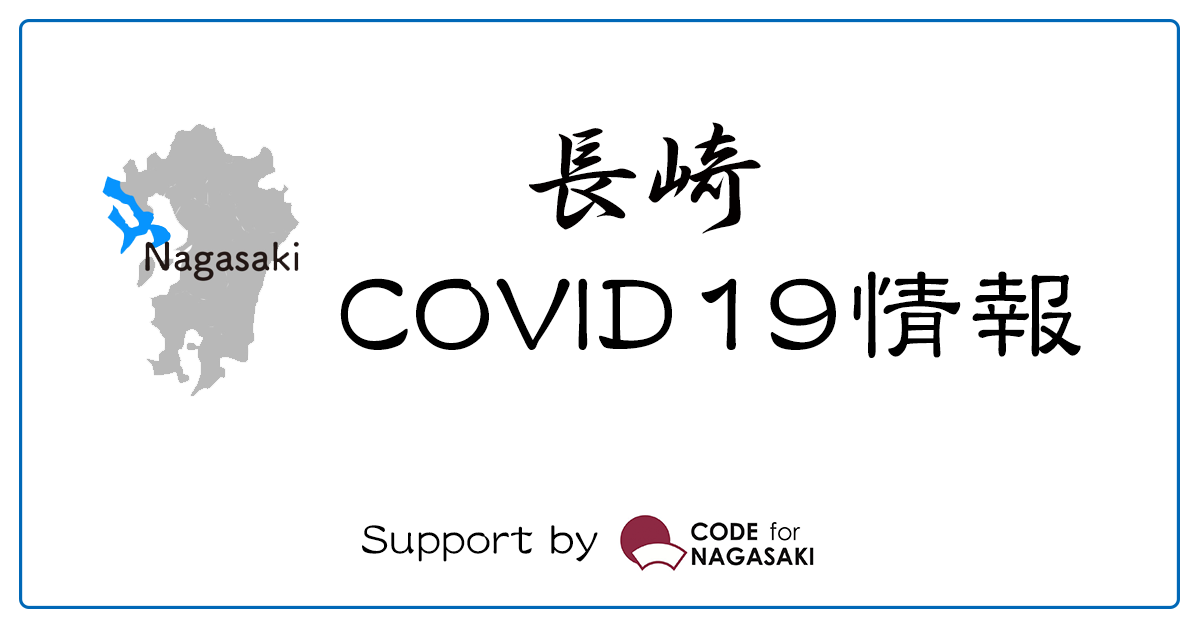
<style>
.page{position:relative;width:1200px;height:630px;background:#ffffff}
.page>*{position:absolute;margin:0}
.t1{font:120px "DFSNGyoSho-W5-MP-RKSJ-H";color:#030000}
.t2{font:120px "DFLeiSho-SB-MP-RKSJ-H";color:#000000}
.t3{font:48px "DFLeiSho-SB-MP-RKSJ-H";color:#000000}
</style>
<div class="page">
<p class="t1" style="left:529px;top:122px;width:232px;height:112px">長崎</p>
<p class="t2" style="left:340px;top:271px;width:741px;height:87px">COVID19情報</p>
<p class="t3" style="left:362px;top:525px;width:236px;height:37px">Support by</p>
</div>
